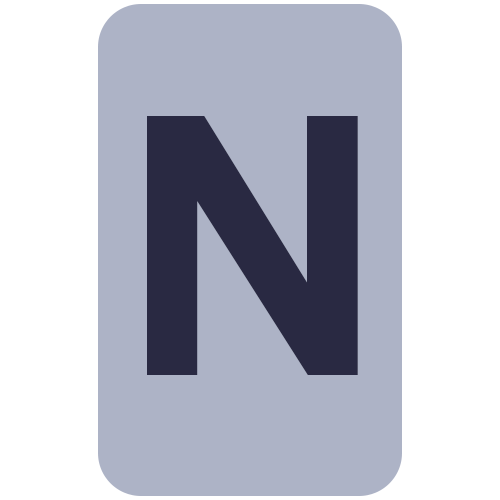
<style>
.page{position:relative;width:500px;height:500px;background:#ffffff}
.page>*{position:absolute;margin:0}
.t1{font:389.7px "CoolveticaRg-Regular";color:#292942}
</style>
<div class="page">
<p class="t1" style="left:147px;top:116px;width:211px;height:259px">N</p>
</div>
